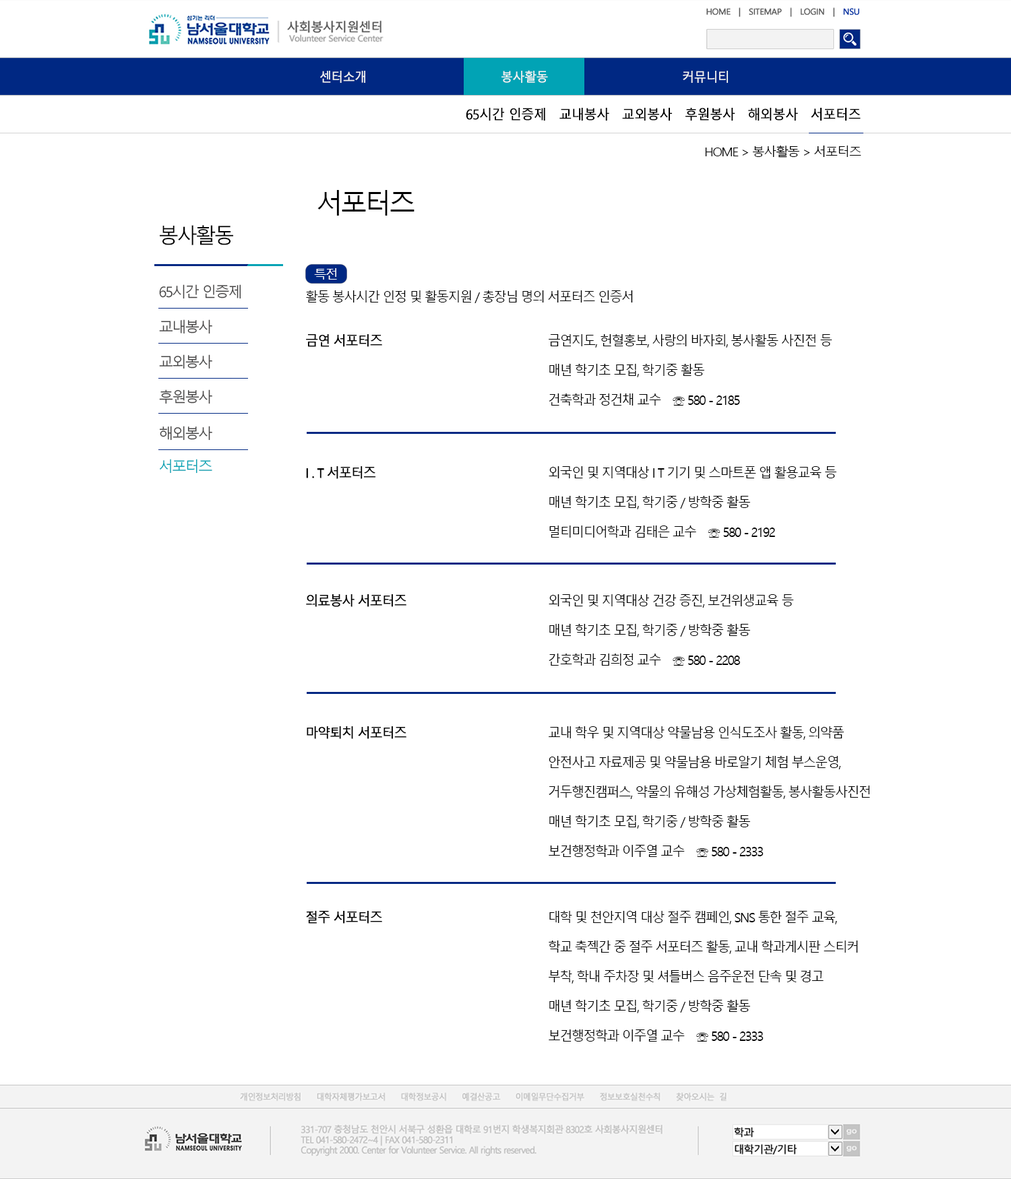
<style>
.page{position:relative;width:1011px;height:1179px;background:#ffffff}
.page>*{position:absolute;margin:0}
.t1{font:12.6px "MalgunGothicRegular";letter-spacing:-0.05em;color:#f3f3f3;font-weight:bold;scale:0.95 1}
.t2{font:13.5px "MalgunGothicRegular";letter-spacing:-0.05em;color:#000000;font-weight:bold;scale:0.95 1}
.t3{font:12.4px "MalgunGothicRegular";letter-spacing:-0.1em;color:#000000;scale:1.05 1}
.t4{font:27px "MalgunGothicRegular";letter-spacing:-0.1em;color:#000000}
.t5{font:21px "MalgunGothicRegular";letter-spacing:-0.1em;color:#000000}
.t6{font:14.5px "MalgunGothicRegular";letter-spacing:-0.1em;color:#454444}
.t7{font:13.8px "MalgunGothicRegular";letter-spacing:-0.1em;color:#000000;scale:0.95 1}
.t8{font:13.8px/29.7px "MalgunGothicRegular";letter-spacing:-0.1em;color:#000000;scale:0.95 1}
.t9{font:13.8px/29.7px "MalgunGothicRegular";letter-spacing:-0.1em;color:#000000;font-weight:bold;scale:0.95 1}
.t10{font:14.5px "MalgunGothicRegular";letter-spacing:-0.1em;color:#01a3b5}
</style>
<div class="page">
<p class="t1" style="left:320px;top:70px;width:408px;height:13px">센터소개        봉사활동       커뮤니티</p>
<p class="t2" style="left:466px;top:108px;width:395px;height:13px">65시간 인증제　교내봉사　교외봉사　후원봉사　해외봉사　서포터즈</p>
<p class="t3" style="left:705px;top:146px;width:156px;height:12px">HOME &gt; 봉사활동 &gt; 서포터즈</p>
<p class="t4" style="left:317px;top:190px;width:98px;height:26px">서포터즈</p>
<p class="t5" style="left:160px;top:225px;width:73px;height:20px">봉사활동</p>
<p class="t6" style="left:159px;top:284px;width:82px;height:15px">65시간 인증제</p>
<p class="t7" style="left:306px;top:290px;width:327px;height:13px">활동 봉사시간 인정 및 활동지원 / 총장님 명의 서포터즈 인증서</p>
<p class="t6" style="left:159px;top:319px;width:53px;height:15px">교내봉사</p>
<p class="t8" style="left:306px;top:334px;width:526px;height:72px"><span class="t9">금연 서포터즈 </span>       금연지도, 헌혈홍보, 사랑의 바자회, 봉사활동 사진전 등<br>      　    매년 학기초 모집, 학기중 활동<br>          건축학과 정건채 교수　☏ 580 - 2185</p>
<p class="t6" style="left:159px;top:355px;width:53px;height:14px">교외봉사</p>
<p class="t6" style="left:159px;top:390px;width:53px;height:14px">후원봉사</p>
<p class="t6" style="left:159px;top:426px;width:53px;height:15px">해외봉사</p>
<p class="t10" style="left:159px;top:459px;width:53px;height:15px">서포터즈</p>
<p class="t8" style="left:306px;top:466px;width:530px;height:72px"><span class="t9">I . T 서포터즈 </span>        외국인 및 지역대상 I T 기기 및 스마트폰 앱 활용교육 등<br>      　    매년 학기초 모집, 학기중 / 방학중 활동<br>          멀티미디어학과 김태은 교수　☏ 580 - 2192</p>
<p class="t8" style="left:306px;top:594px;width:488px;height:72px"><span class="t9">의료봉사 서포터즈</span>       외국인 및 지역대상 건강 증진, 보건위생교육 등<br>      　    매년 학기초 모집, 학기중 / 방학중 활동<br>          간호학과 김희정 교수　☏ 580 - 2208</p>
<p class="t8" style="left:307px;top:727px;width:563px;height:130px"><span class="t9">마약퇴치 서포터즈 </span>      교내 학우 및 지역대상 약물남용 인식도조사 활동, 의약품<br>          안전사고 자료제공 및 약물남용 바로알기 체험 부스운영,<br>          거두행진캠퍼스, 약물의 유해성 가상체험활동, 봉사활동사진전<br>      　    매년 학기초 모집, 학기중 / 방학중 활동<br>          보건행정학과 이주열 교수　☏ 580 - 2333</p>
<p class="t8" style="left:306px;top:911px;width:552px;height:131px"><span class="t9">절주 서포터즈 </span>       대학 및 천안지역 대상 절주 캠페인, SNS 통한 절주 교육, <br>          학교 축젝간 중 절주 서포터즈 활동, 교내 학과게시판 스티커<br>          부착, 학내 주차장 및 셔틀버스 음주운전 단속 및 경고<br>      　    매년 학기초 모집, 학기중 / 방학중 활동<br>          보건행정학과 이주열 교수　☏ 580 - 2333</p>
</div>
